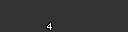
<style>
.page{position:relative;width:128px;height:32px;background:#333333}
.page>*{position:absolute;margin:0}
.t1{font:10px "Terminal";color:#ffffff}
</style>
<div class="page">
<p class="t1" style="left:47px;top:23px;width:5px;height:7px">4</p>
</div>
